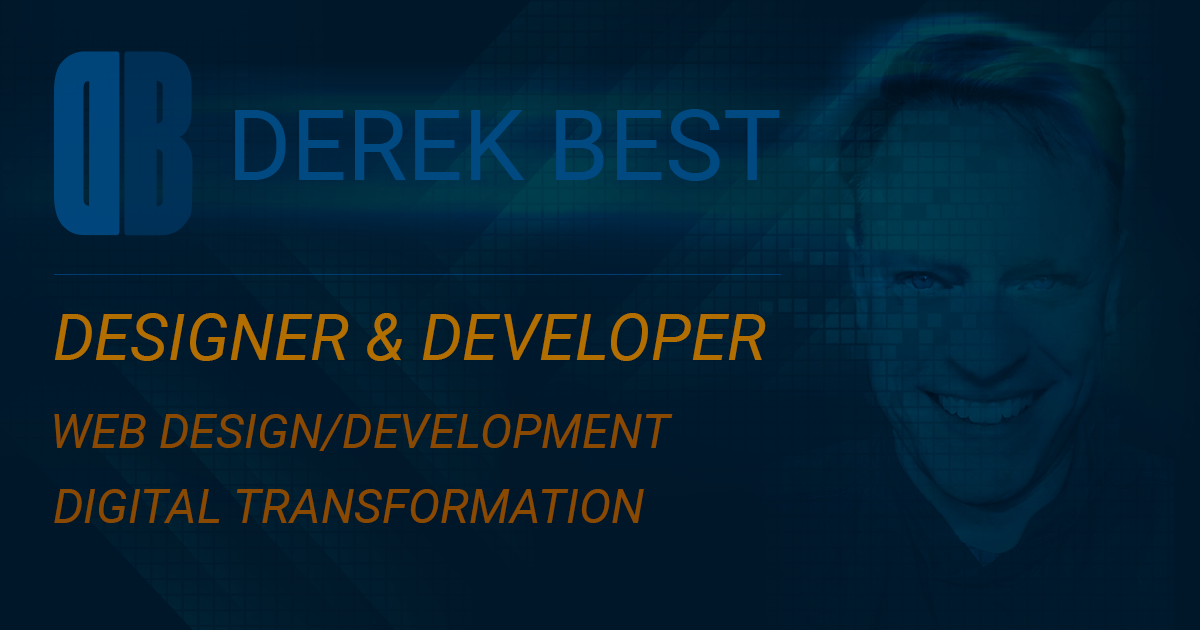
<style>
.page{position:relative;width:1200px;height:630px}
.page>*{position:absolute;margin:0}
.t1{font:180px "FilmNoir";color:#004981}
.t2{font:180px "FilmNoir";color:#00345e}
.t3{font:98px "Roboto-Regular";color:#004981}
.t4{font:65px "Roboto-Italic";color:#b26f00}
.t5{font:48px "Roboto-Italic";color:#8a4900}
</style>
<div class="page">
<p class="t1" style="left:53px;top:51px;width:67px;height:185px;rotate:180deg;opacity:0.9">D</p>
<p class="t2" style="left:124px;top:51px;width:69px;height:185px;opacity:0.8">B</p>
<p class="t3" style="left:235px;top:109px;width:545px;height:72px">DEREK BEST</p>
<p class="t4" style="left:54px;top:313px;width:712px;height:48px">DESIGNER &amp; DEVELOPER</p>
<p class="t5" style="left:54px;top:414px;width:619px;height:37px">WEB DESIGN/DEVELOPMENT</p>
<p class="t5" style="left:54px;top:489px;width:590px;height:34px">DIGITAL TRANSFORMATION</p>
</div>
